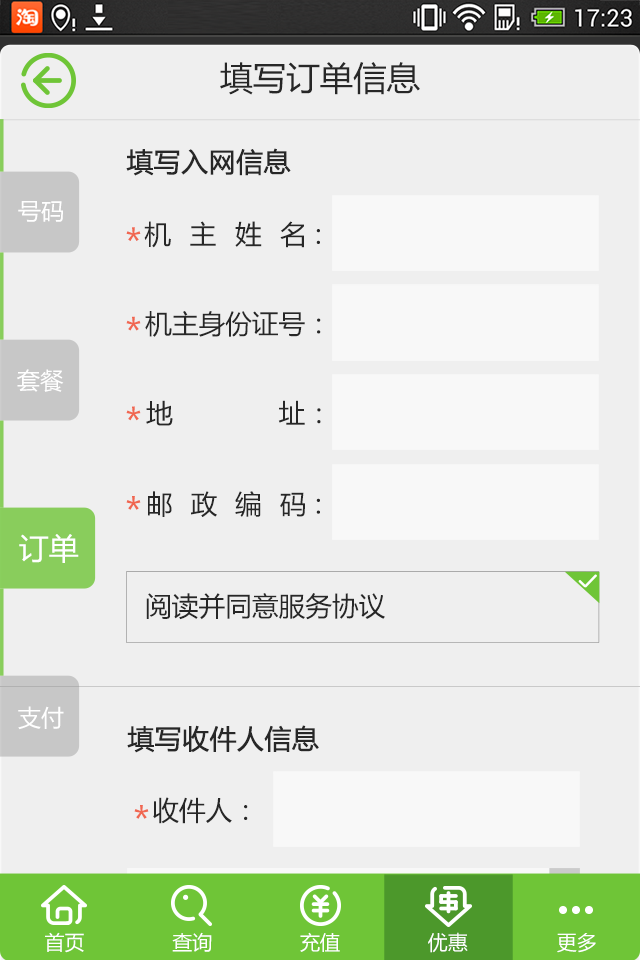
<style>
.page{position:relative;width:640px;height:960px;background:#efefef}
.page>*{position:absolute;margin:0}
.t1{font:33.3px "MicrosoftYaHei";color:#272727}
.t2{font:26.7px "MicrosoftYaHei";color:#272727;font-weight:bold}
.t3{font:23.3px "MicrosoftYaHei";color:#ffffff}
.t4{font:26.7px "MicrosoftYaHei";letter-spacing:0.7em;color:#272727}
.t5{font:37px "MicrosoftYaHei";color:#f06751}
.t6{font:26.7px "MicrosoftYaHei";color:#272727}
.t7{font:26.7px "MicrosoftYaHei";letter-spacing:0.67em;color:#272727}
.t8{font:30px "MicrosoftYaHei";color:#ffffff}
.t9{font:20px "MicrosoftYaHei";color:#ffffff}
</style>
<div class="page">
<p class="t1" style="left:220px;top:62px;width:200px;height:33px">填写订单信息</p>
<p class="t2" style="left:126px;top:148px;width:165px;height:28px">填写入网信息</p>
<p class="t3" style="left:18px;top:201px;width:45px;height:21px">号码</p>
<p class="t4" style="left:144px;top:221px;width:176px;height:27px">机主姓名：</p>
<p class="t5" style="left:126px;top:227px;width:15px;height:14px">*</p>
<p class="t5" style="left:126px;top:316px;width:15px;height:15px">*</p>
<p class="t6" style="left:145px;top:311px;width:176px;height:26px">机主身份证号：</p>
<p class="t3" style="left:17px;top:369px;width:47px;height:23px">套餐</p>
<p class="t4" style="left:146px;top:400px;width:175px;height:26px">地址：</p>
<p class="t5" style="left:126px;top:406px;width:15px;height:15px">*</p>
<p class="t5" style="left:126px;top:496px;width:15px;height:14px">*</p>
<p class="t7" style="left:148px;top:491px;width:172px;height:26px">邮政编码：</p>
<p class="t8" style="left:19px;top:534px;width:60px;height:29px">订单</p>
<p class="t6" style="left:146px;top:593px;width:239px;height:27px">阅读并同意服务协议</p>
<p class="t3" style="left:18px;top:706px;width:46px;height:24px">支付</p>
<p class="t2" style="left:127px;top:725px;width:192px;height:28px">填写收件人信息</p>
<p class="t6" style="left:153px;top:797px;width:95px;height:27px">收件人：</p>
<p class="t5" style="left:134px;top:805px;width:15px;height:14px">*</p>
<p class="t9" style="left:45px;top:932px;width:39px;height:21px">首页</p>
<p class="t9" style="left:172px;top:932px;width:40px;height:20px">查询</p>
<p class="t9" style="left:300px;top:932px;width:40px;height:20px">充值</p>
<p class="t9" style="left:428px;top:932px;width:40px;height:21px">优惠</p>
<p class="t9" style="left:557px;top:933px;width:39px;height:20px">更多</p>
</div>
